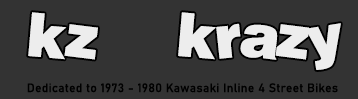
<style>
.page{position:relative;width:358px;height:99px;background:#333333}
.page>*{position:absolute;margin:0}
.t1{font:60px "Soopafresh";letter-spacing:0.025em;color:#ededed}
.t2{font:12px "Bahnschrift";letter-spacing:0.025em;color:#000000}
</style>
<div class="page">
<p class="t1" style="left:28px;top:12px;width:313px;height:58px">kz    krazy</p>
<p class="t2" style="left:27px;top:83px;width:311px;height:10px">Dedicated to 1973 - 1980 Kawasaki Inline 4 Street Bikes</p>
</div>
